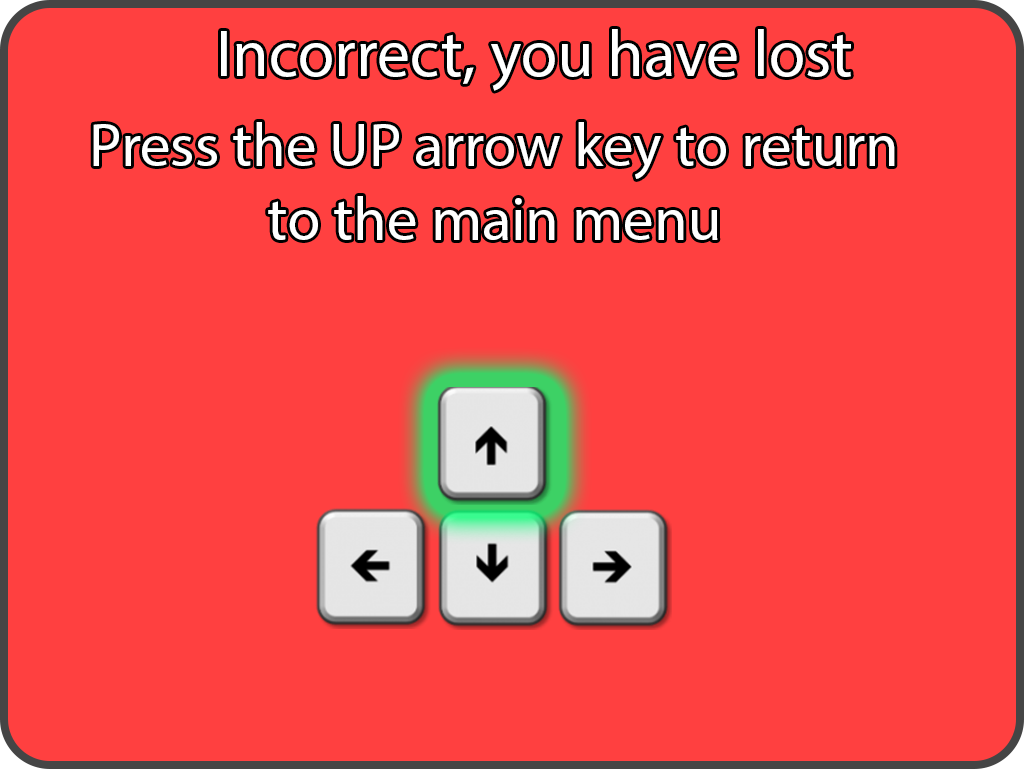
<style>
.page{position:relative;width:1024px;height:769px;background:#ff4040}
.page>*{position:absolute;margin:0}
.t1{font:66px "MyriadPro-Regular";color:#ffffff}
.t2{font:61px "MyriadPro-Regular";color:#ffffff}
</style>
<div class="page">
<p class="t1" style="left:221px;top:29px;width:630px;height:62px">Incorrect, you have lost</p>
<p class="t2" style="left:93px;top:122px;width:802px;height:118px;text-align:center">Press the UP arrow key to return<br>to the main menu</p>
</div>
